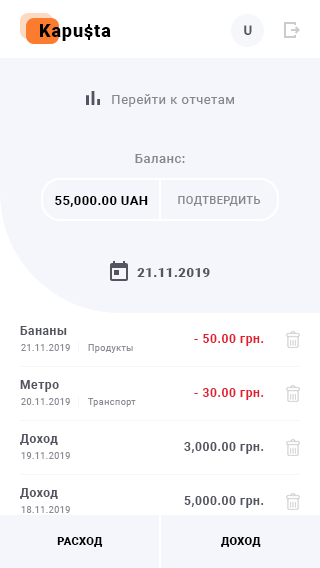
<style>
.page{position:relative;width:320px;height:568px;background:#f4f6fb}
.page>*{position:absolute;margin:0}
.t1{font:18px "Roboto-Black";letter-spacing:0.05em;color:#000000}
.t2{font:13px "Roboto-Medium";letter-spacing:0.035em;color:#52555f}
.t3{font:13px "Roboto-Regular";letter-spacing:0.04em;color:#84878e}
.t4{font:13px "Roboto-Medium";letter-spacing:0.04em;color:#84878e}
.t5{font:13px "Roboto-Bold";letter-spacing:0.03em;color:#000000}
.t6{font:11px "Roboto-Medium";letter-spacing:0.04em;color:#84878e;text-transform:uppercase}
.t7{font:13px "Roboto-Black";letter-spacing:0.04em;color:#52555f}
.t8{font:12px "Roboto-Bold";letter-spacing:0.05em;color:#52555f}
.t9{font:12px "Roboto-Bold";letter-spacing:0.05em;color:#e21e31}
.t10{font:9px "Roboto-Regular";letter-spacing:0.05em;color:#8a8c95}
.t11{font:11px "Roboto-Black";letter-spacing:0.03em;color:#000000;text-transform:uppercase}
</style>
<div class="page">
<p class="t1" style="left:40px;top:24px;width:71px;height:17px">Kapusta</p>
<p class="t2" style="left:244px;top:25px;width:8px;height:10px">U</p>
<p class="t3" style="left:112px;top:94px;width:122px;height:13px">Перейти к отчетам</p>
<p class="t4" style="left:135px;top:154px;width:50px;height:9px">Баланс:</p>
<p class="t5" style="left:55px;top:196px;width:93px;height:11px">55,000.00 UAH</p>
<p class="t6" style="left:178px;top:196px;width:83px;height:10px">подтвердить</p>
<p class="t7" style="left:137px;top:268px;width:73px;height:9px">21.11.2019</p>
<p class="t8" style="left:20px;top:326px;width:47px;height:9px">Бананы</p>
<p class="t9" style="left:194px;top:334px;width:70px;height:12px">- 50.00 грн.</p>
<p class="t10" style="left:21px;top:344px;width:49px;height:7px">21.11.2019</p>
<p class="t10" style="left:88px;top:344px;width:45px;height:9px">Продукты</p>
<p class="t8" style="left:20px;top:380px;width:39px;height:12px">Метро</p>
<p class="t9" style="left:194px;top:388px;width:70px;height:12px">- 30.00 грн.</p>
<p class="t10" style="left:21px;top:398px;width:49px;height:7px">20.11.2019</p>
<p class="t10" style="left:88px;top:398px;width:48px;height:9px">Транспорт</p>
<p class="t8" style="left:20px;top:434px;width:38px;height:11px">Доход</p>
<p class="t8" style="left:184px;top:442px;width:80px;height:12px">3,000.00 грн.</p>
<p class="t10" style="left:21px;top:452px;width:49px;height:7px">19.11.2019</p>
<p class="t8" style="left:20px;top:488px;width:38px;height:11px">Доход</p>
<p class="t8" style="left:184px;top:496px;width:80px;height:12px">5,000.00 грн.</p>
<p class="t10" style="left:21px;top:506px;width:49px;height:7px">18.11.2019</p>
<p class="t11" style="left:57px;top:537px;width:46px;height:10px">Расход</p>
<p class="t11" style="left:221px;top:537px;width:40px;height:10px">доход</p>
</div>
